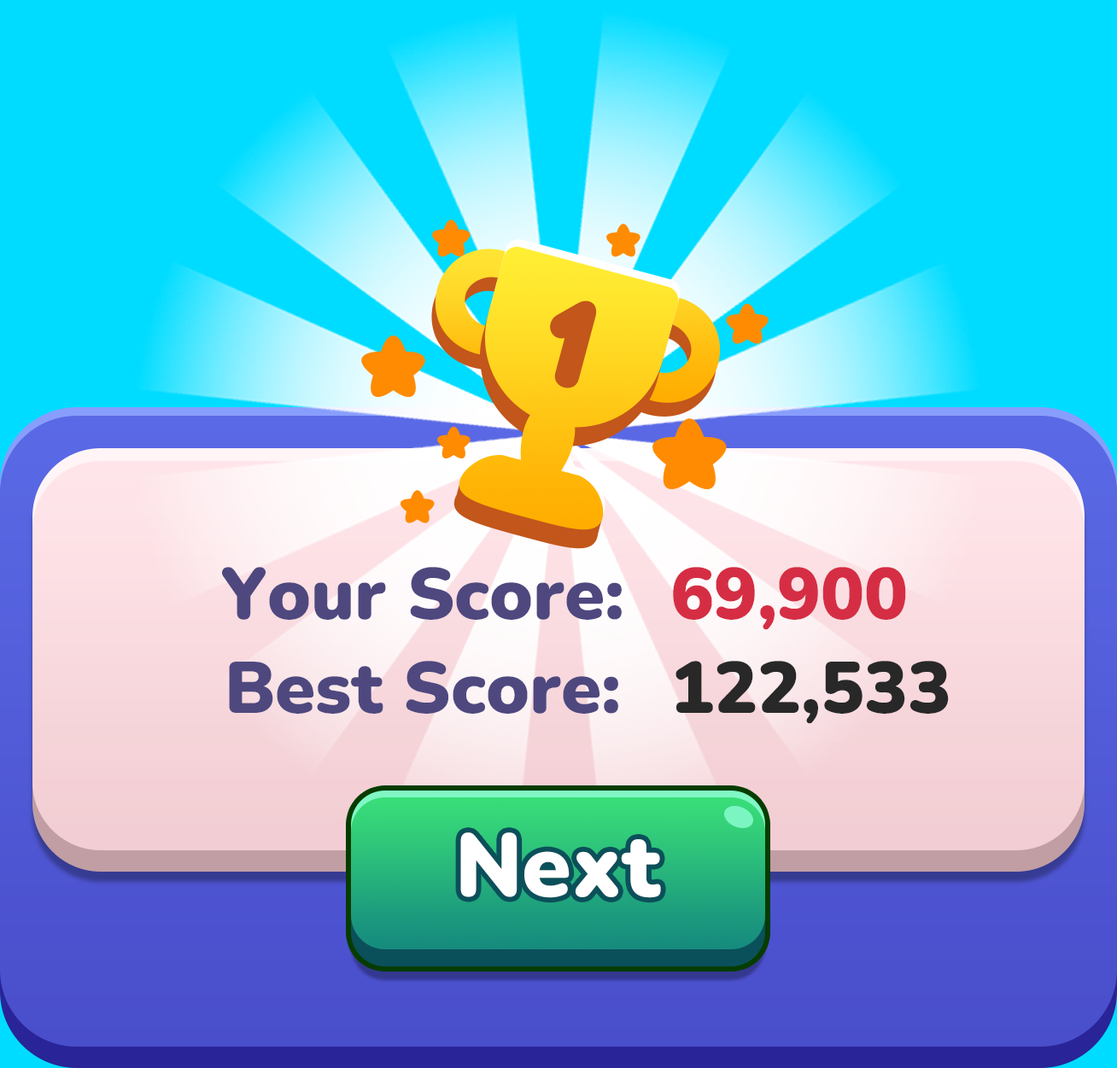
<style>
.page{position:relative;width:1117px;height:1068px;background:#00dcff}
.page>*{position:absolute;margin:0}
.t1{font:125.5px "Junegull-Regular";color:#c2561b}
.t2{font:72.6px "Nunito-Black";color:#4e487f}
.t3{font:72.6px "Nunito-Black";color:#d52e44}
.t4{font:72.6px "Nunito-Black";color:#282828}
.t5{font:88.8px "Nunito-Black";color:#ffffff}
</style>
<div class="page">
<p class="t1" style="left:550px;top:300px;width:47px;height:88px;rotate:15deg">1</p>
<p class="t2" style="left:222px;top:567px;width:399px;height:53px">Your Score:</p>
<p class="t3" style="left:673px;top:567px;width:233px;height:63px">69,900</p>
<p class="t2" style="left:229px;top:661px;width:389px;height:53px">Best Score:</p>
<p class="t4" style="left:675px;top:661px;width:273px;height:63px">122,533</p>
<p class="t5" style="left:460px;top:832px;width:201px;height:66px">Next</p>
</div>
